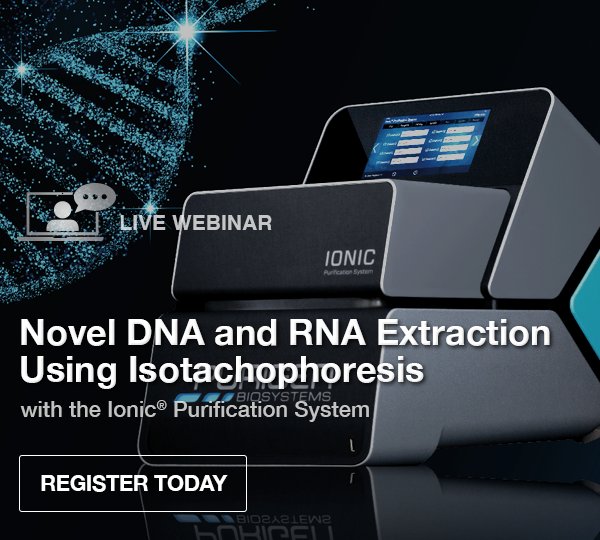
<style>
.page{position:relative;width:600px;height:540px}
.page>*{position:absolute;margin:0}
.t1{font:21.1px "Helvetica-Bold";color:#c5c6c7;text-transform:uppercase}
.t2{font:36px/37px "HelveticaNeue-Bold";color:#fefefe}
.t3{font:22px "HelveticaNeue-Medium";color:#c3c3c4}
.t4{font:21.6px "HelveticaNeue-Bold";letter-spacing:-0.01em;color:#ffffff;text-transform:uppercase}
</style>
<div class="page">
<p class="t1" style="left:120px;top:215px;width:152px;height:15px">Live Webinar</p>
<p class="t2" style="left:21px;top:319px;width:529px;height:70px">Novel DNA and RNA Extraction<br>Using Isotachophoresis</p>
<p class="t3" style="left:20px;top:400px;width:349px;height:22px">with the Ionic® Purification System</p>
<p class="t4" style="left:41px;top:475px;width:187px;height:17px">Register Today</p>
</div>
